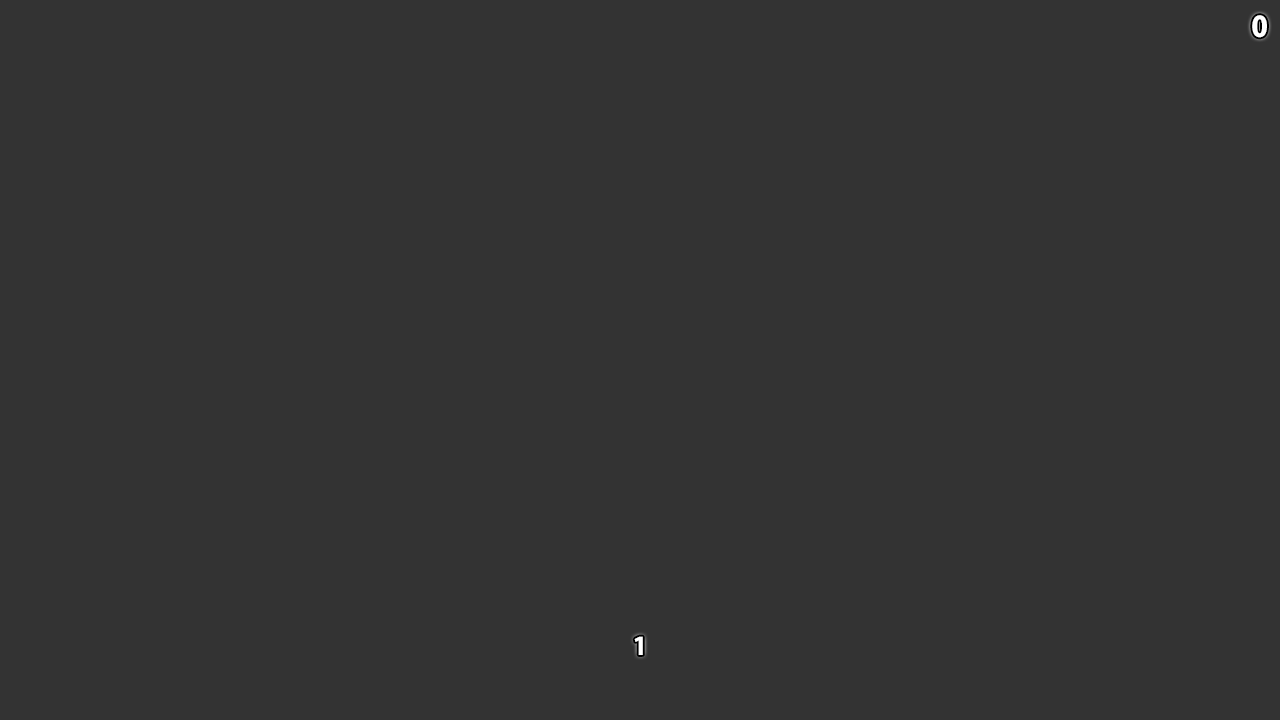
<style>
.page{position:relative;width:1280px;height:720px;background:#333333}
.page>*{position:absolute;margin:0}
.t1{font:28px "KozGoPr6N-Heavy";color:#ffffff}
.t2{font:24px "KozGoPr6N-Heavy";color:#ffffff}
</style>
<div class="page">
<p class="t1" style="left:1252px;top:15px;width:15px;height:23px">0</p>
<p class="t2" style="left:634px;top:636px;width:9px;height:19px">1</p>
</div>
